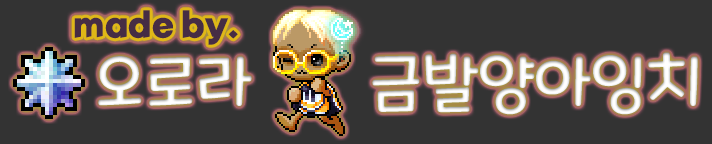
<style>
.page{position:relative;width:712px;height:144px;background:#333333}
.page>*{position:absolute;margin:0}
.t1{font:32px "RixYeoljeongdoR";color:#462d44}
.t2{font:64px "MaplestoryLight";color:#ffffff}
</style>
<div class="page">
<p class="t1" style="left:74px;top:10px;width:164px;height:35px">made by.</p>
<p class="t2" style="left:98px;top:52px;width:600px;height:63px">오로라       금발양아잉치</p>
</div>
